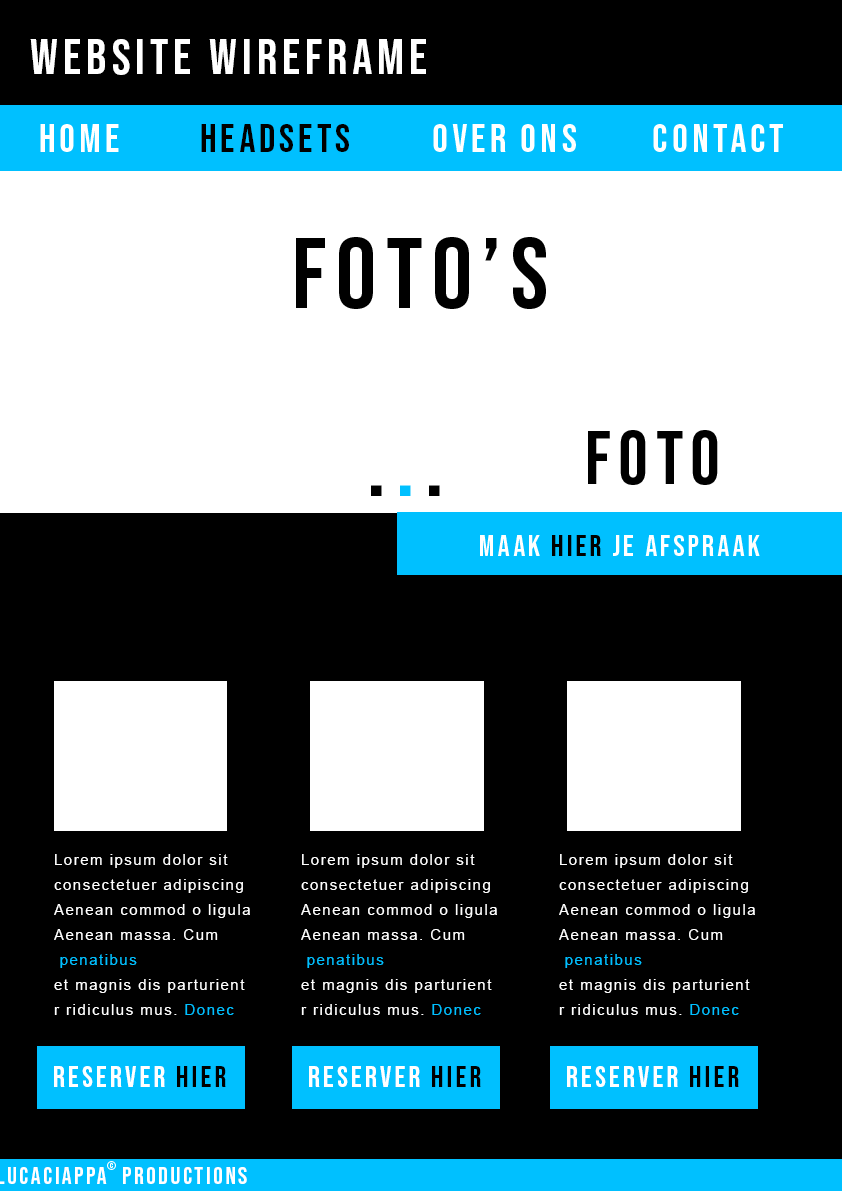
<style>
.page{position:relative;width:842px;height:1191px;background:#000000}
.page>*{position:absolute;margin:0}
.t1{font:50px "BebasNeue";letter-spacing:0.1em;color:#ffffff}
.t2{font:40px "BebasNeue-Regular";letter-spacing:0.1em;color:#ffffff}
.t3{font:40px "BebasNeue";letter-spacing:0.1em;color:#000000}
.t4{font:100px "BebasNeue-Regular";letter-spacing:0.1em;color:#000000}
.t5{font:75px "BebasNeue-Regular";letter-spacing:0.1em;color:#000000}
.t6{font:100px "BebasNeue-Regular";letter-spacing:0.1em;color:#00c0ff}
.t7{font:30px "BebasNeue-Regular";letter-spacing:0.1em;color:#ffffff}
.t8{font:30px "BebasNeue-Regular";letter-spacing:0.1em;color:#000000}
.t9{font:15px/25px "ArialMT";letter-spacing:0.1em;color:#ffffff}
.t10{font:15px/25px "ArialMT";letter-spacing:0.1em;color:#00c0ff}
.t11{font:30px "BebasNeue";letter-spacing:0.1em;color:#ffffff}
.t12{font:30px "BebasNeue";letter-spacing:0.1em;color:#000000}
.t13{font:12.2px "BebasNeue-Regular";letter-spacing:0.1em;color:#ffffff}
</style>
<div class="page">
<p class="t1" style="left:30px;top:39px;width:396px;height:36px">website wireframe</p>
<p class="t2" style="left:40px;top:124px;width:79px;height:28px">home</p>
<p class="t3" style="left:201px;top:124px;width:148px;height:28px">headsets</p>
<p class="t2" style="left:433px;top:124px;width:143px;height:28px">over ons</p>
<p class="t2" style="left:653px;top:124px;width:130px;height:28px">contact</p>
<p class="t4" style="left:296px;top:237px;width:250px;height:72px">foto’s</p>
<p class="t5" style="left:588px;top:430px;width:130px;height:55px">foto</p>
<p class="t4" style="left:371px;top:485px;width:69px;height:11px">.<span class="t6">.</span>.</p>
<p class="t7" style="left:480px;top:535px;width:280px;height:21px">Maak <span class="t8">hier</span> je afspraak</p>
<p class="t9" style="left:54px;top:854px;width:196px;height:161px;text-align:right">Lorem ipsum dolor sit  <br>consectetuer adipiscing <br>Aenean commod o ligula  <br>Aenean massa. Cum<span class="t10"><br> penatibus</span> <br>et magnis dis parturient<br>r ridiculus mus. <span class="t10">Donec</span></p>
<p class="t9" style="left:301px;top:854px;width:196px;height:161px;text-align:right">Lorem ipsum dolor sit  <br>consectetuer adipiscing <br>Aenean commod o ligula  <br>Aenean massa. Cum<span class="t10"><br> penatibus</span> <br>et magnis dis parturient<br>r ridiculus mus. <span class="t10">Donec</span></p>
<p class="t9" style="left:559px;top:854px;width:196px;height:161px;text-align:right">Lorem ipsum dolor sit  <br>consectetuer adipiscing <br>Aenean commod o ligula  <br>Aenean massa. Cum<span class="t10"><br> penatibus</span> <br>et magnis dis parturient<br>r ridiculus mus. <span class="t10">Donec</span></p>
<p class="t11" style="left:54px;top:1066px;width:172px;height:21px">reserver <span class="t12">hier</span></p>
<p class="t11" style="left:309px;top:1066px;width:172px;height:21px">reserver <span class="t12">hier</span></p>
<p class="t11" style="left:567px;top:1066px;width:172px;height:21px">reserver <span class="t12">hier</span></p>
<p class="t13" style="left:107px;top:1161px;width:9px;height:9px">©</p>
</div>
